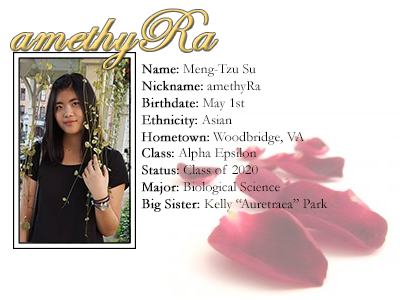
<style>
.page{position:relative;width:400px;height:300px;background:#ffffff}
.page>*{position:absolute;margin:0}
.t1{font:60px "EdwardianScriptITC";font-weight:bold}
.t2{font:14px "Garamond";color:#000000}
.t3{font:14px "Garamond";color:#000000;font-weight:bold}
</style>
<div class="page">
<p class="t1" style="left:11px;top:9px;width:207px;height:61px">amethyRa</p>
<p class="t2" style="left:141px;top:63px;width:187px;height:149px"><span class="t3">Name:</span> Meng-Tzu Su<br><span class="t3">Nickname:</span> amethyRa<br><span class="t3">Birthdate:</span> May 1st<br><span class="t3">Ethnicity:</span> Asian<br><span class="t3">Hometown:</span> Woodbridge, VA<br><span class="t3">Class:</span> Alpha Epsilon<br><span class="t3">Status:</span> Class of 2020<br><span class="t3">Major:</span> Biological Science<br><span class="t3">Big Sister: </span>Kelly “Auretraea” Park</p>
</div>
